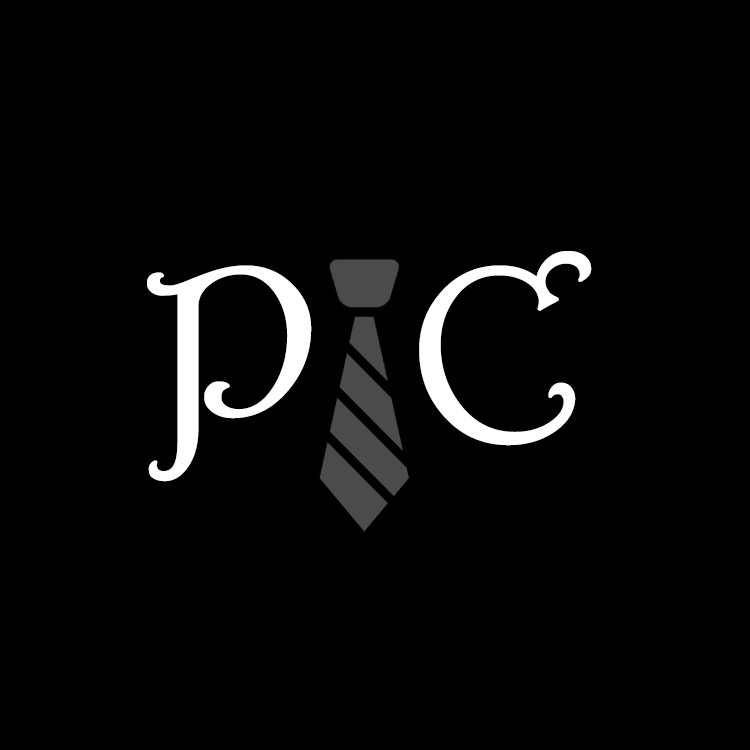
<style>
.page{position:relative;width:750px;height:750px;background:#000000}
.page>*{position:absolute;margin:0}
.t1{font:249.3px "Harrington";letter-spacing:-0.005em;color:#ffffff;font-weight:bold;scale:1.11 1}
</style>
<div class="page">
<p class="t1" style="left:147px;top:251px;width:445px;height:231px">P C</p>
</div>
